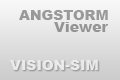
<style>
.page{position:relative;width:120px;height:80px}
.page>*{position:absolute;margin:0}
.t1{font:14px "Arial-Black";color:#999999}
.t2{font:14px "Arial-Black";color:#949494}
.t3{font:14px "Arial-Black";color:#eaeaea}
</style>
<div class="page">
<p class="t1" style="left:19px;top:10px;width:89px;height:10px">ANGSTORM</p>
<p class="t2" style="left:54px;top:22px;width:54px;height:10px">Viewer</p>
<p class="t3" style="left:10px;top:60px;width:88px;height:10px">VISION-SIM</p>
</div>
